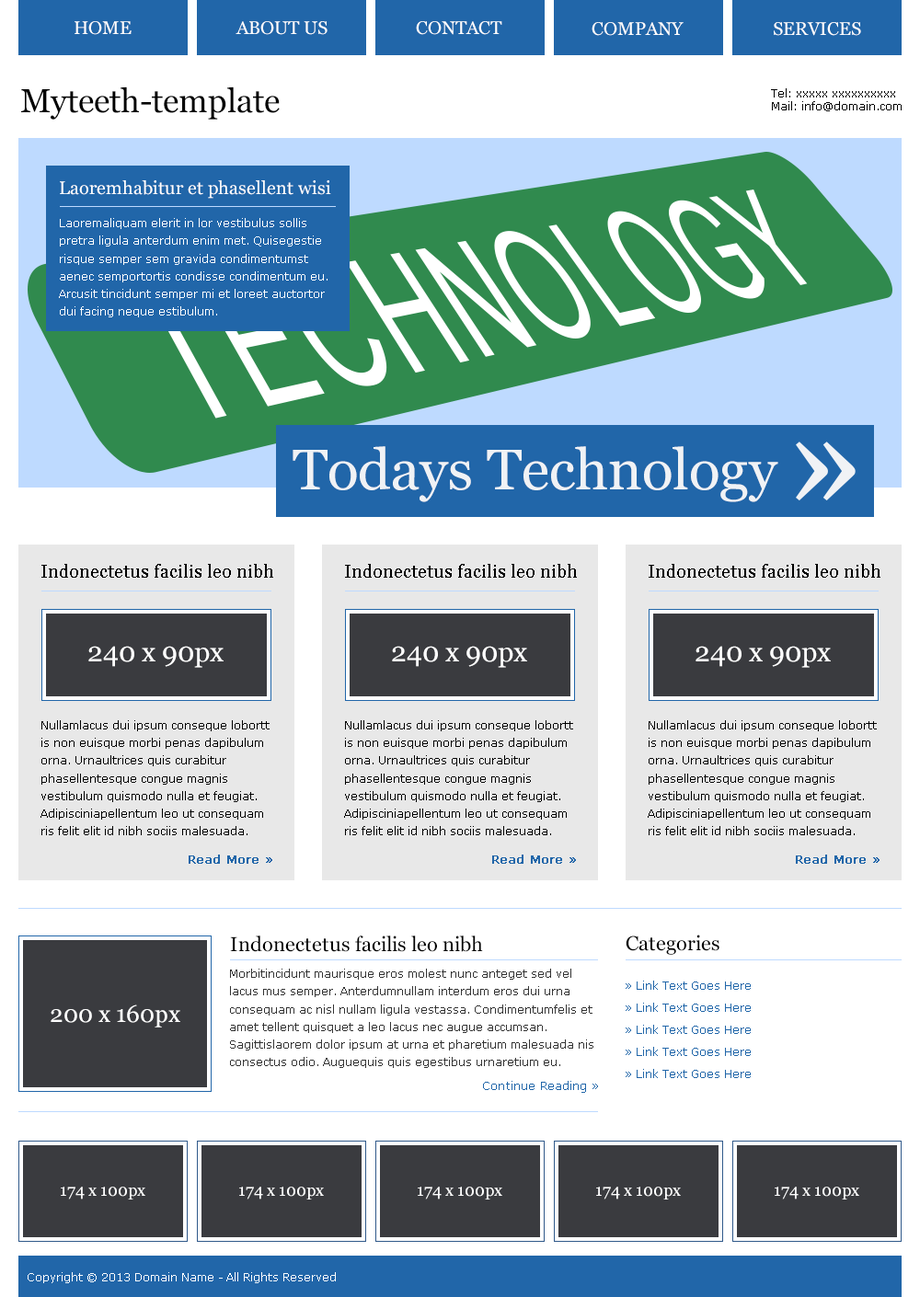
<style>
.page{position:relative;width:920px;height:1297px;background:#ffffff}
.page>*{position:absolute;margin:0}
.t1{font:18.4px "Georgia";color:#ffffff}
.t2{font:33.1px "Georgia";color:#000000}
.t3{font:11px/13.2px "Verdana";color:#000000}
.t4{font:11px/17.7px "Verdana";color:#ffffff}
.t5{font:57px "Georgia";color:#f0f2f5}
.t6{font:18.4px "Georgia";color:#000000}
.t7{font:27.6px "Georgia";color:#ffffff}
.t8{font:11px/17.7px "Verdana";color:#000000}
.t9{font:12px "Verdana";color:#2166a9;font-weight:bold}
.t10{font:20.2px "Georgia";color:#000000}
.t11{font:11px/17.7px "Verdana";color:#333333}
.t12{font:11px/11px "Verdana";color:#2166a9}
.t13{font:23.9px "Georgia";color:#ffffff}
.t14{font:12px "Verdana";color:#2166a9}
.t15{font:16.6px "Georgia";color:#ffffff}
.t16{font:11px "Verdana";color:#ffffff}
</style>
<div class="page">
<p class="t1" style="left:74px;top:21px;width:58px;height:14px">HOME</p>
<p class="t1" style="left:235px;top:21px;width:92px;height:14px">ABOUT US</p>
<p class="t1" style="left:416px;top:21px;width:86px;height:14px">CONTACT</p>
<p class="t1" style="left:591px;top:22px;width:92px;height:14px">COMPANY</p>
<p class="t1" style="left:773px;top:22px;width:88px;height:14px">SERVICES</p>
<p class="t2" style="left:21px;top:86px;width:259px;height:34px">Myteeth-template</p>
<p class="t3" style="left:771px;top:88px;width:130px;height:23px">Tel: xxxxx xxxxxxxxxx<br>Mail: info@domain.com</p>
<p class="t1" style="left:60px;top:180px;width:271px;height:19px">Laoremhabitur et phasellent wisi</p>
<p class="t4" style="left:59px;top:218px;width:268px;height:99px">Laoremaliquam elerit in lor vestibulus sollis pretra ligula anterdum enim met. Quisegestie risque semper sem gravida condimentumst aenec semportortis condisse condimentum eu. Arcusit tincidunt semper mi et loreet auctortor dui facing neque estibulum.</p>
<p class="t5" style="left:292px;top:446px;width:486px;height:56px">Todays Technology</p>
<p class="t6" style="left:41px;top:564px;width:232px;height:14px">Indonectetus facilis leo nibh</p>
<p class="t6" style="left:345px;top:564px;width:232px;height:14px">Indonectetus facilis leo nibh</p>
<p class="t6" style="left:648px;top:564px;width:232px;height:14px">Indonectetus facilis leo nibh</p>
<p class="t7" style="left:88px;top:646px;width:135px;height:22px">240 x 90px</p>
<p class="t7" style="left:392px;top:646px;width:135px;height:22px">240 x 90px</p>
<p class="t7" style="left:695px;top:646px;width:135px;height:22px">240 x 90px</p>
<p class="t8" style="left:40px;top:720px;width:229px;height:115px">Nullamlacus dui ipsum conseque lobortt<br>is non euisque morbi penas dapibulum <br>orna. Urnaultrices quis curabitur <br>phasellentesque congue magnis <br>vestibulum quismodo nulla et feugiat. <br>Adipisciniapellentum leo ut consequam <br>ris felit elit id nibh sociis malesuada.</p>
<p class="t8" style="left:344px;top:720px;width:229px;height:115px">Nullamlacus dui ipsum conseque lobortt<br>is non euisque morbi penas dapibulum <br>orna. Urnaultrices quis curabitur <br>phasellentesque congue magnis <br>vestibulum quismodo nulla et feugiat. <br>Adipisciniapellentum leo ut consequam <br>ris felit elit id nibh sociis malesuada.</p>
<p class="t8" style="left:647px;top:720px;width:229px;height:115px">Nullamlacus dui ipsum conseque lobortt<br>is non euisque morbi penas dapibulum <br>orna. Urnaultrices quis curabitur <br>phasellentesque congue magnis <br>vestibulum quismodo nulla et feugiat. <br>Adipisciniapellentum leo ut consequam <br>ris felit elit id nibh sociis malesuada.</p>
<p class="t9" style="left:189px;top:854px;width:83px;height:10px">Read More »</p>
<p class="t9" style="left:492px;top:854px;width:84px;height:10px">Read More »</p>
<p class="t9" style="left:795px;top:854px;width:84px;height:10px">Read More »</p>
<p class="t10" style="left:230px;top:935px;width:253px;height:17px">Indonectetus facilis leo nibh</p>
<p class="t10" style="left:625px;top:934px;width:94px;height:21px">Categories</p>
<p class="t11" style="left:230px;top:968px;width:363px;height:100px">Morbitincidunt maurisque eros molest nunc anteget sed vel lacus mus semper. Anterdumnullam interdum eros dui urna consequam ac nisl nullam ligula vestassa. Condimentumfelis et amet tellent quisquet a leo lacus nec augue accumsan. Sagittislaorem dolor ipsum at urna et pharetium malesuada nis consectus odio. Auguequis quis egestibus urnaretium eu.</p>
<p class="t12" style="left:625px;top:980px;width:125px;height:98px">» Link Text Goes Here<br><br>» Link Text Goes Here<br><br>» Link Text Goes Here<br><br>» Link Text Goes Here<br><br>» Link Text Goes Here</p>
<p class="t13" style="left:51px;top:1004px;width:129px;height:23px">200 x 160px</p>
<p class="t14" style="left:483px;top:1081px;width:115px;height:12px">Continue Reading »</p>
<p class="t15" style="left:61px;top:1186px;width:84px;height:13px">174 x 100px</p>
<p class="t15" style="left:239px;top:1186px;width:85px;height:13px">174 x 100px</p>
<p class="t15" style="left:418px;top:1186px;width:84px;height:13px">174 x 100px</p>
<p class="t15" style="left:596px;top:1186px;width:85px;height:13px">174 x 100px</p>
<p class="t15" style="left:774px;top:1186px;width:85px;height:13px">174 x 100px</p>
<p class="t16" style="left:28px;top:1272px;width:308px;height:11px">Copyright © 2013 Domain Name - All Rights Reserved</p>
</div>
